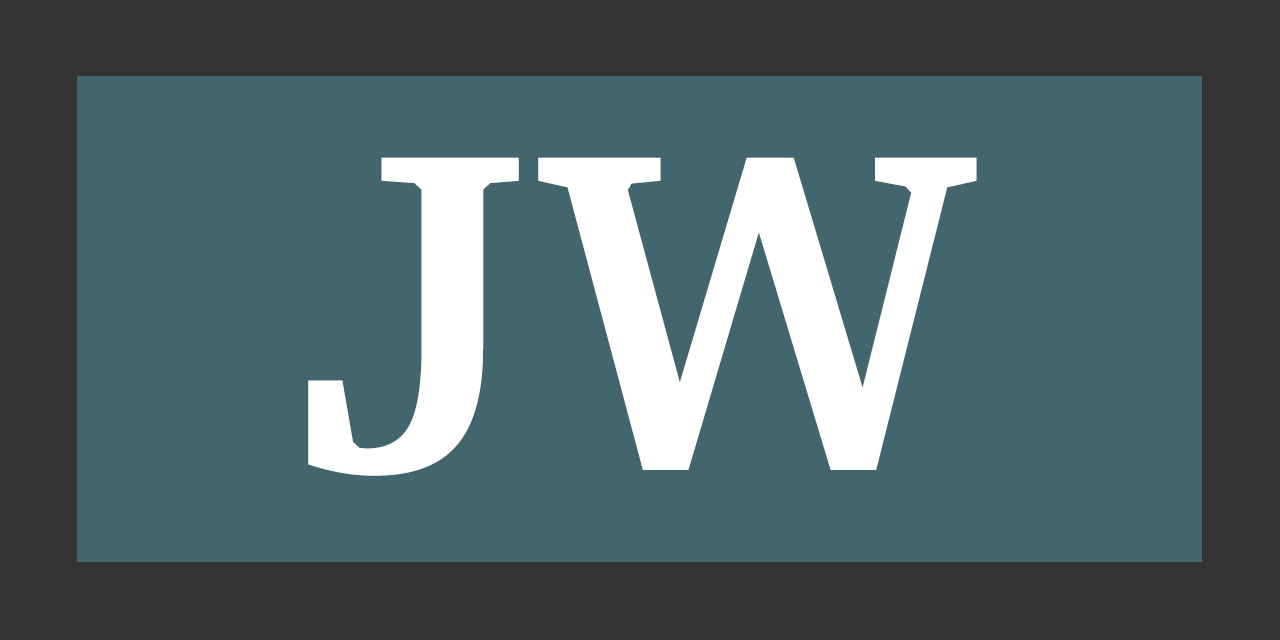
<style>
.page{position:relative;width:1280px;height:640px;background:#43656d}
.page>*{position:absolute;margin:0}
.t1{font:465px "Charter-Bold";letter-spacing:0.04em;color:#ffffff;text-transform:uppercase}
</style>
<div class="page">
<p class="t1" style="left:308px;top:157px;width:669px;height:319px">JW</p>
</div>
